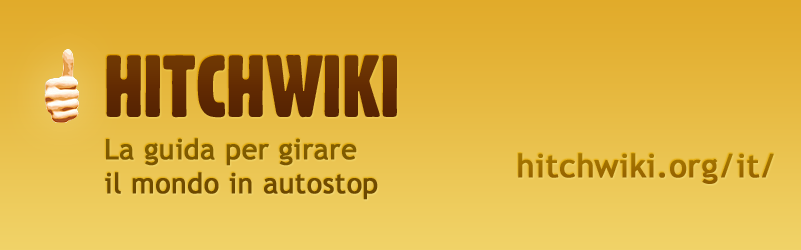
<style>
.page{position:relative;width:801px;height:250px}
.page>*{position:absolute;margin:0}
.t1{font:85.8px "Gothic821CondensedBT-Regular";color:#632b02;text-transform:uppercase}
.t2{font:28.1px "TrebuchetMS";color:#785200;font-weight:bold}
.t3{font:32.3px "TrebuchetMS";color:#9d6b00;font-weight:bold}
</style>
<div class="page">
<p class="t1" style="left:106px;top:55px;width:291px;height:63px">Hitchwiki</p>
<p class="t2" style="left:105px;top:138px;width:273px;height:62px">La guida per girare<br>il mondo in autostop</p>
<p class="t3" style="left:518px;top:153px;width:256px;height:31px">hitchwiki.org/it/</p>
</div>
